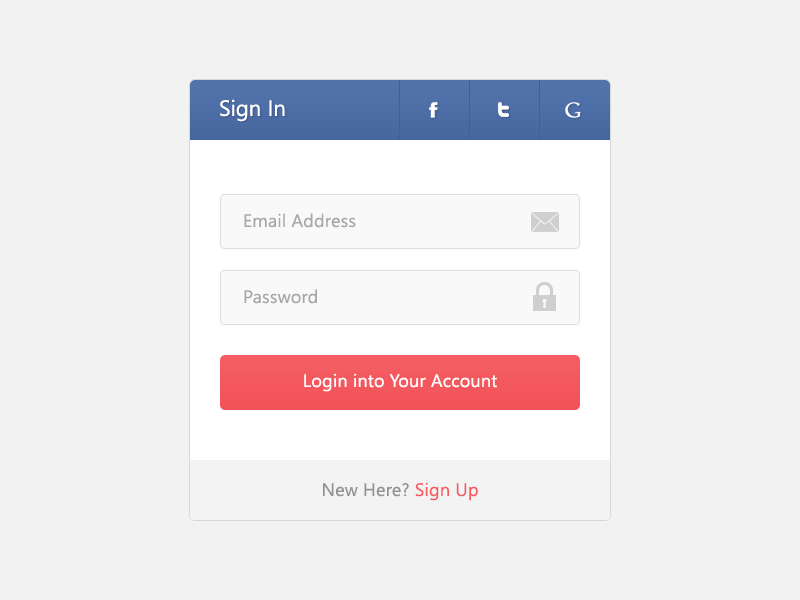
<style>
.page{position:relative;width:800px;height:600px;background:#f2f2f2}
.page>*{position:absolute;margin:0}
.t1{font:22px "SegoeUI";letter-spacing:0.01em;color:#ffffff}
.t2{font:18px "SegoeUI";letter-spacing:0.01em;color:#a7a6a6}
.t3{font:18px "SegoeUI";letter-spacing:0.01em;color:#a7a7a7}
.t4{font:18px "SegoeUI";letter-spacing:0.01em;color:#ffffff}
.t5{font:18px "SegoeUI";letter-spacing:0.01em;color:#929292}
.t6{font:18px "SegoeUI";letter-spacing:0.01em;color:#f35b61}
</style>
<div class="page">
<p class="t1" style="left:220px;top:99px;width:65px;height:23px">Sign In</p>
<p class="t2" style="left:244px;top:213px;width:112px;height:15px">Email Address</p>
<p class="t3" style="left:244px;top:289px;width:73px;height:15px">Password</p>
<p class="t4" style="left:304px;top:373px;width:193px;height:19px">Login into Your Account</p>
<p class="t5" style="left:323px;top:482px;width:155px;height:19px">New Here? <span class="t6">Sign Up</span></p>
</div>
